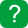
<style>
.page{position:relative;width:28px;height:28px;background:#009f3c}
.page>*{position:absolute;margin:0}
.t1{font:24px "ArialMT";color:#ffffff}
</style>
<div class="page">
<p class="t1" style="left:9px;top:4px;width:12px;height:19px">?</p>
</div>
